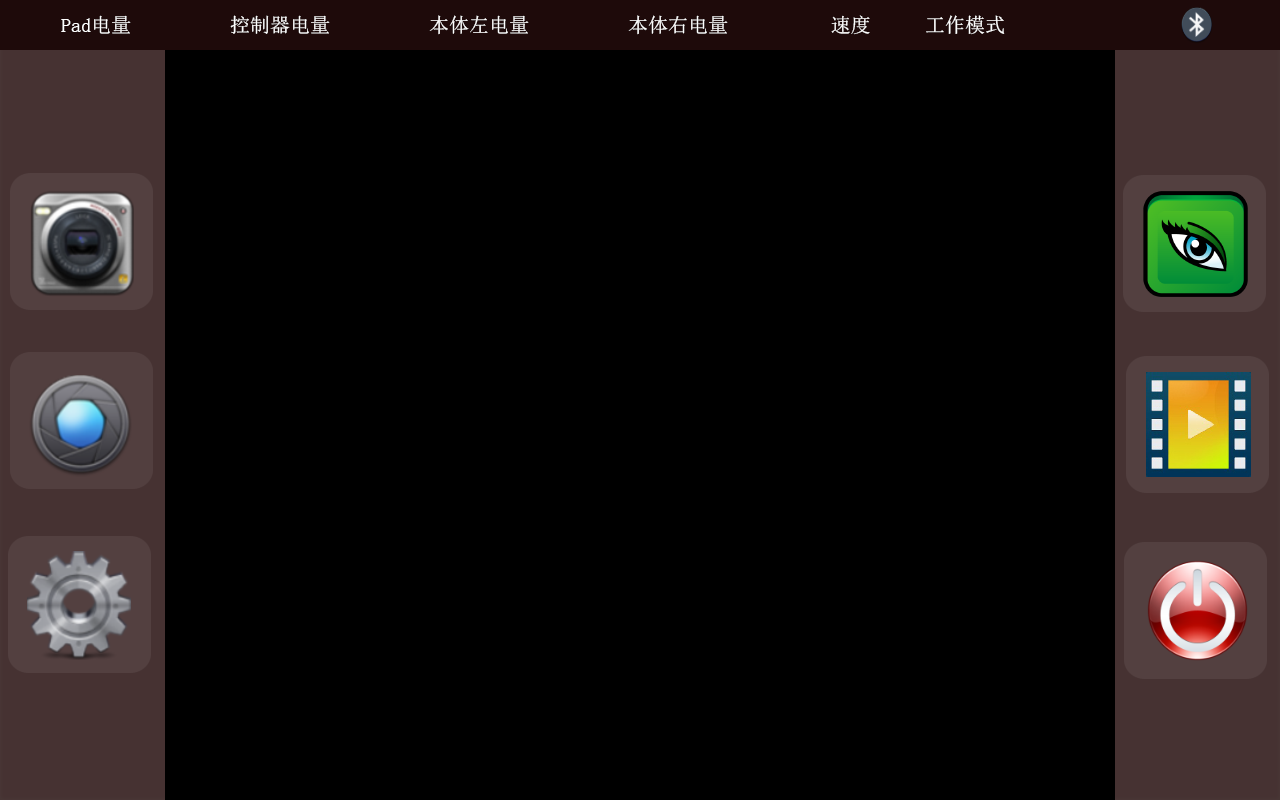
<style>
.page{position:relative;width:1280px;height:800px;background:#000000}
.page>*{position:absolute;margin:0}
.t1{font:20px "SimSun";color:#ffffff}
</style>
<div class="page">
<p class="t1" style="left:61px;top:15px;width:70px;height:19px">Pad电量</p>
<p class="t1" style="left:230px;top:15px;width:100px;height:19px">控制器电量</p>
<p class="t1" style="left:429px;top:15px;width:100px;height:20px">本体左电量</p>
<p class="t1" style="left:628px;top:15px;width:100px;height:20px">本体右电量</p>
<p class="t1" style="left:831px;top:15px;width:39px;height:20px">速度</p>
<p class="t1" style="left:926px;top:15px;width:79px;height:20px">工作模式</p>
</div>
